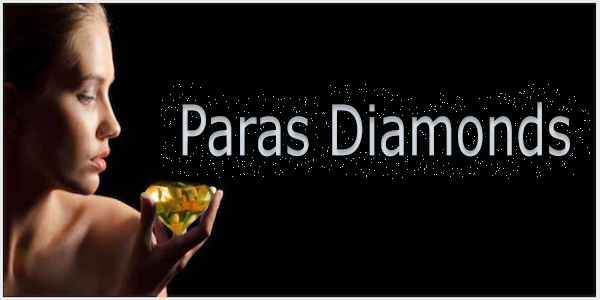
<style>
.page{position:relative;width:600px;height:300px;background:#000000}
.page>*{position:absolute;margin:0}
.t1{font:69.7px "Verdana";color:#c5cdd4;scale:0.7 1}
</style>
<div class="page">
<p class="t1" style="left:182px;top:102px;width:388px;height:55px">Paras Diamonds</p>
</div>
